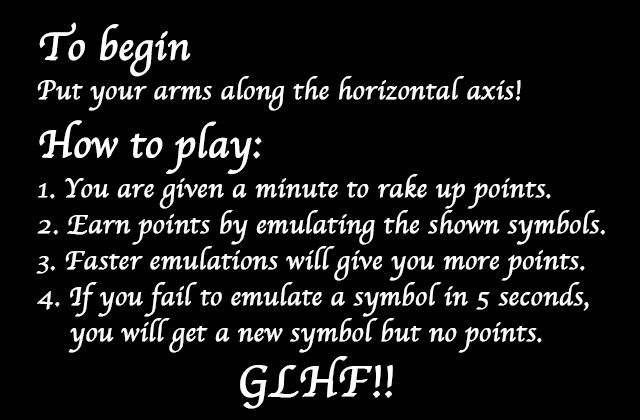
<style>
.page{position:relative;width:640px;height:420px;background:#000000}
.page>*{position:absolute;margin:0}
.t1{font:40px "Apple-Chancery";color:#fffefe;font-weight:bold}
.t2{font:27px "Apple-Chancery";color:#fffefe;font-weight:bold}
.t3{font:27px/36px "Apple-Chancery";color:#fffefe;font-weight:bold}
.t4{font:45px "Apple-Chancery";color:#fffefe;font-weight:bold}
</style>
<div class="page">
<p class="t1" style="left:39px;top:22px;width:152px;height:55px">To begin</p>
<p class="t2" style="left:37px;top:76px;width:484px;height:35px">Put your arms along the horizontal axis!</p>
<p class="t1" style="left:39px;top:120px;width:223px;height:54px">How to play:</p>
<p class="t3" style="left:36px;top:174px;width:569px;height:179px">1. You are given a minute to rake up points.<br>2. Earn points by emulating the shown symbols.<br>3. Faster emulations will give you more points.<br>4. If you fail to emulate a symbol in 5 seconds,<br>    you will get a new symbol but no points.</p>
<p class="t4" style="left:240px;top:356px;width:153px;height:53px">GLHF!!</p>
</div>
